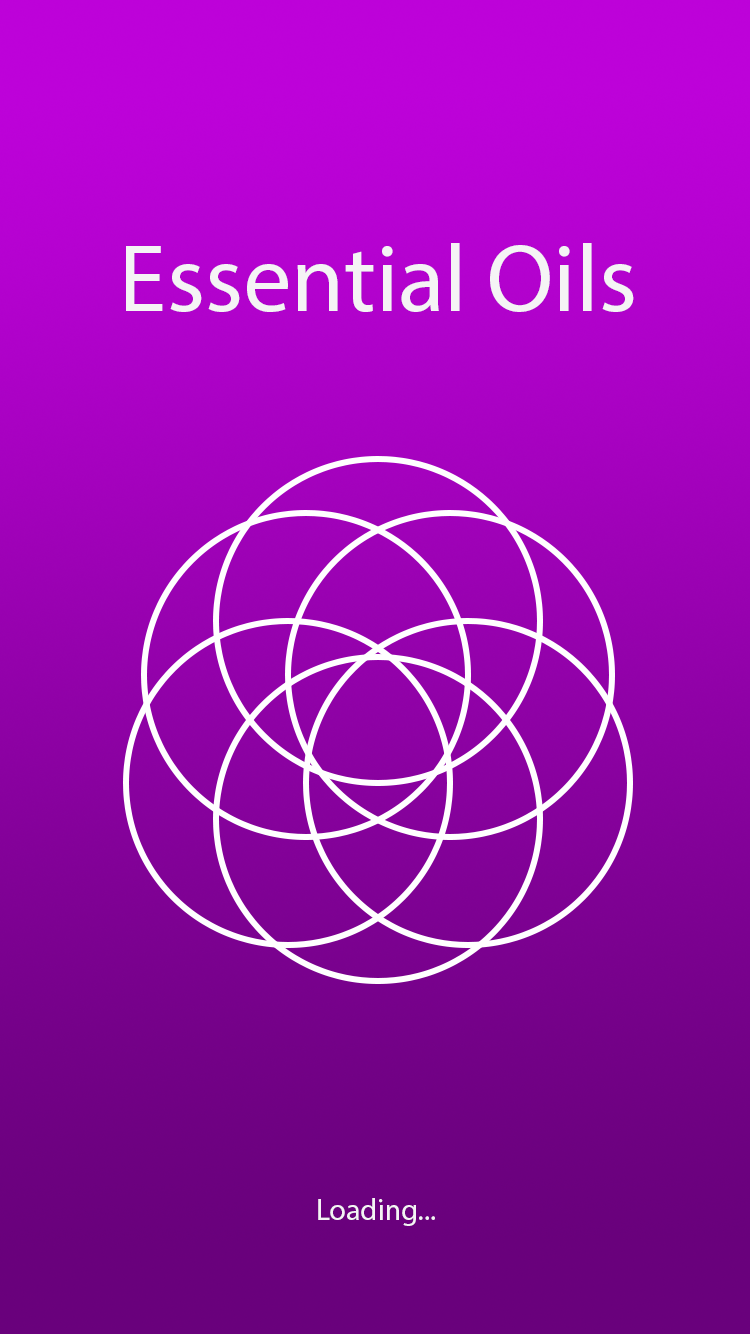
<style>
.page{position:relative;width:750px;height:1334px}
.page>*{position:absolute;margin:0}
.t1{font:96px "MyriadPro-Regular";color:#f5f4f5}
.t2{font:30px "MyriadPro-Regular";color:#f5f4f5}
</style>
<div class="page">
<p class="t1" style="left:126px;top:243px;width:508px;height:69px">Essential Oils</p>
<p class="t2" style="left:318px;top:1198px;width:117px;height:28px">Loading...</p>
</div>
